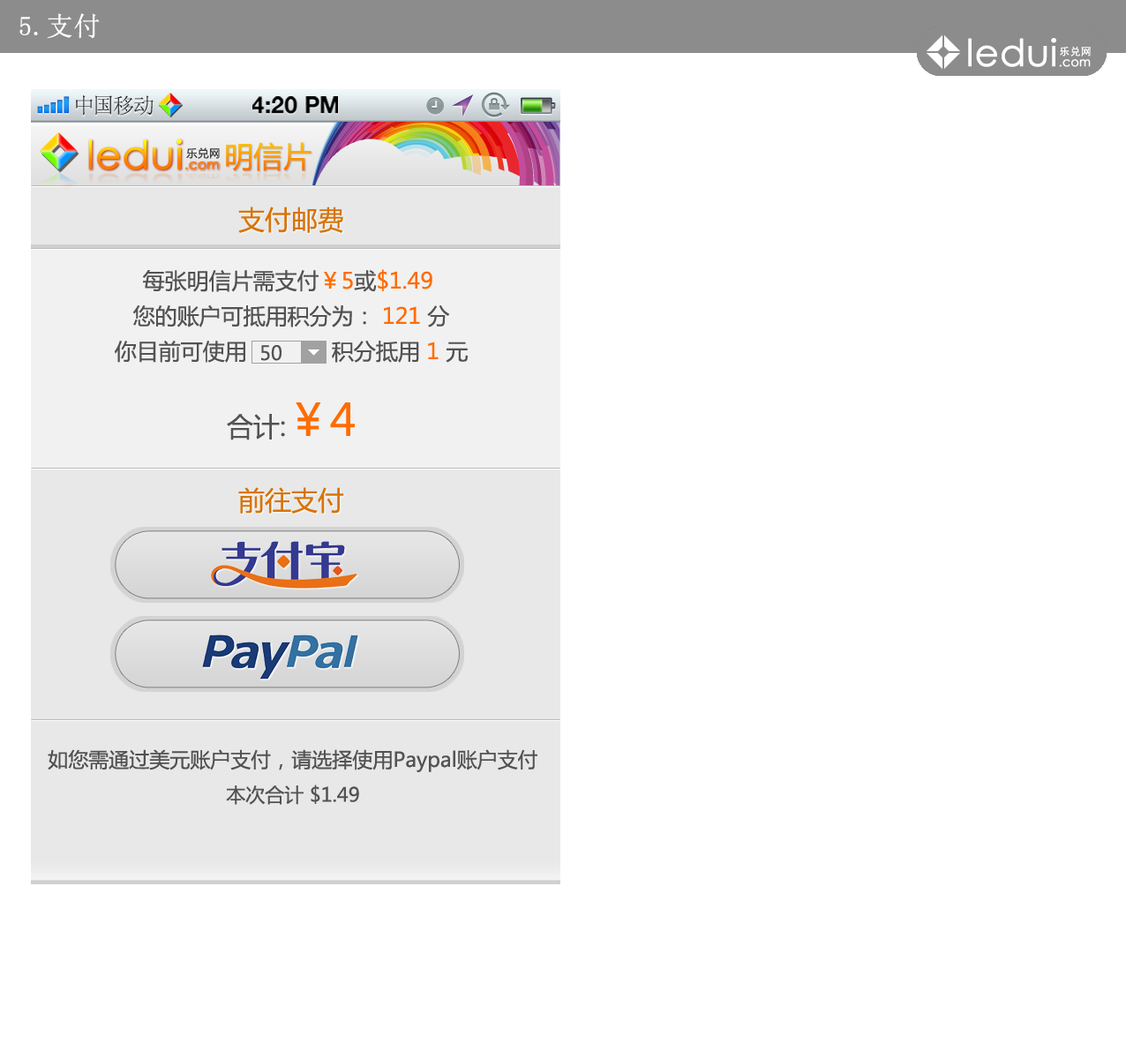
<style>
.page{position:relative;width:1126px;height:1059px;background:#ffffff}
.page>*{position:absolute;margin:0}
.t1{font:26.5px "SimSun";color:#ffffff;font-weight:bold}
.t2{font:21.5px "SimSun";color:#414141}
.t3{font:23.1px "HelveticaNeue-Bold";color:#000000;text-transform:uppercase}
.t4{font:39.5px "CenturyGothic";font-weight:bold}
.t5{font:13.2px "CenturyGothic";font-weight:bold}
.t6{font:10.9px "MicrosoftYaHei";letter-spacing:0.05em;color:#3d3d3d}
.t7{font:29.1px "MicrosoftYaHei"}
.t8{font:23.7px "CenturyGothic";color:#e0d5ce;font-weight:bold;scale:1.67 1}
.t9{font:7.9px "CenturyGothic";color:#e0d5ce;font-weight:bold;scale:1.67 1}
.t10{font:26.5px "MicrosoftYaHei";color:#d7740a}
.t11{font:22.1px/35.3px "MicrosoftYaHei";color:#525252}
.t12{font:22.1px/35.3px "MicrosoftYaHei";color:#ff6c00}
.t13{font:19.4px "MicrosoftYaHei";color:#525252}
.t14{font:26.5px "MicrosoftYaHei";color:#525252}
.t15{font:44.1px "MicrosoftYaHei";color:#ff6c00}
.t16{font:20.3px "MicrosoftYaHei";color:#525252}
</style>
<div class="page">
<p class="t1" style="left:19px;top:13px;width:81px;height:26px">5.支付</p>
<p class="t2" style="left:76px;top:95px;width:78px;height:21px">中国移动</p>
<p class="t3" style="left:252px;top:96px;width:86px;height:18px">4:20 PM</p>
<p class="t4" style="left:88px;top:139px;width:131px;height:31px">ledui<span class="t5">.com</span></p>
<p class="t6" style="left:186px;top:147px;width:34px;height:12px">乐兑网</p>
<p class="t7" style="left:226px;top:142px;width:86px;height:29px">明信片</p>
<p class="t8" style="left:88px;top:173px;width:131px;height:19px">ledui<span class="t9">.com</span></p>
<p class="t10" style="left:238px;top:206px;width:105px;height:27px">支付邮费</p>
<p class="t11" style="left:115px;top:269px;width:353px;height:94px;text-align:center">每张明信片需支付<span class="t12">￥5</span>或<span class="t12">$1.49</span> <br>您的账户可抵用积分为： <span class="t12">121 </span>分<br>你目前可使用             积分抵用 <span class="t12">1 </span>元</p>
<p class="t13" style="left:261px;top:345px;width:21px;height:16px">50</p>
<p class="t14" style="left:227px;top:402px;width:128px;height:38px">合计:<span class="t15">￥4</span></p>
<p class="t10" style="left:238px;top:487px;width:106px;height:27px">前往支付</p>
<p class="t16" style="left:48px;top:749px;width:489px;height:56px;text-align:center">如您需通过美元账户支付，请选择使用Paypal账户支付<br><span class="t13">本次合计 $1.49</span></p>
</div>
